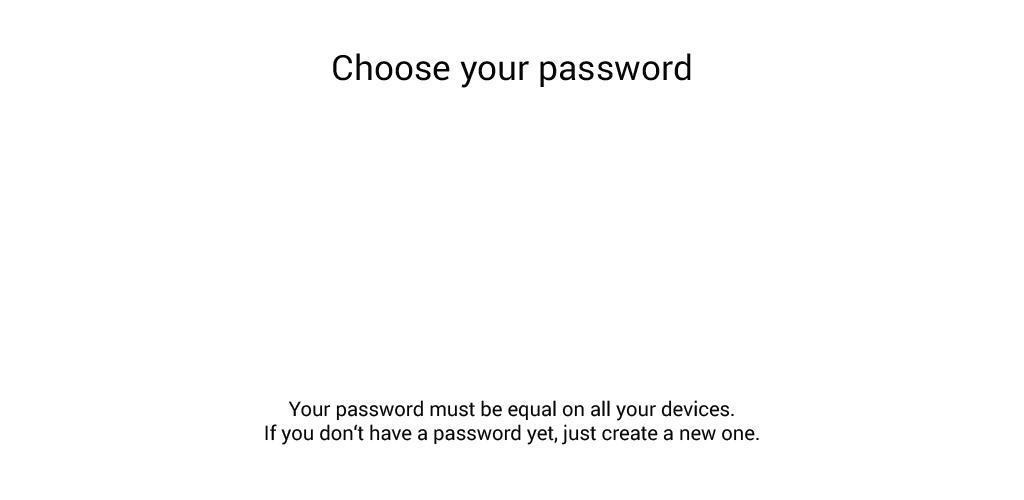
<style>
.page{position:relative;width:1024px;height:500px;background:#ffffff}
.page>*{position:absolute;margin:0}
.t1{font:34.8px "Roboto-Regular";color:#060606}
.t2{font:20px "Roboto-Regular";color:#060606}
</style>
<div class="page">
<p class="t1" style="left:333px;top:53px;width:358px;height:35px">Choose your password</p>
<p class="t2" style="left:265px;top:400px;width:494px;height:45px;text-align:center">Your password must be equal on all your devices.<br>If you don‘t have a password yet, just create a new one.</p>
</div>
